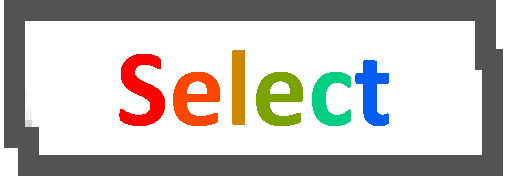
<style>
.page{position:relative;width:512px;height:176px;background:#ffffff}
.page>*{position:absolute;margin:0}
.t1{font:110.7px "Calibri-Bold";color:#ff0000}
.t2{font:110.7px "Calibri-Bold";color:#ff4600}
.t3{font:110.7px "Calibri-Bold";color:#ce8500}
.t4{font:110.7px "Calibri-Bold";color:#7ba300}
.t5{font:110.7px "Calibri-Bold";color:#00ce82}
.t6{font:110.7px "Calibri-Bold";color:#005df0}
</style>
<div class="page">
<p class="t1" style="left:119px;top:50px;width:270px;height:76px">S<span class="t2">e</span><span class="t3">l</span><span class="t4">e</span><span class="t5">c</span><span class="t6">t</span></p>
</div>
